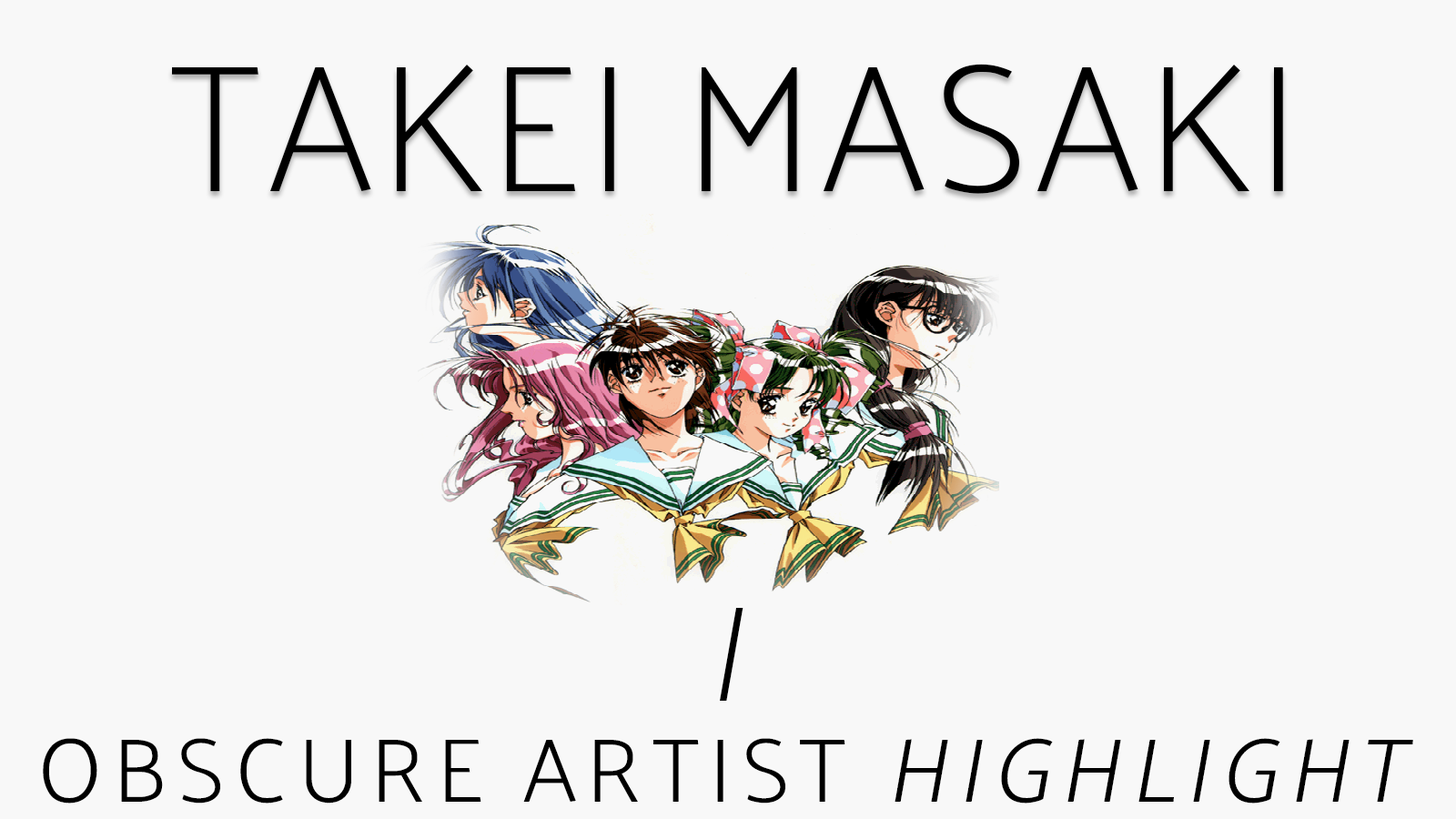
<style>
.page{position:relative;width:1456px;height:819px;background:#f8f8f8}
.page>*{position:absolute;margin:0}
.t1{font:182px "Palanquin-Thin";letter-spacing:0.025em;color:#000000}
.t2{font:136.5px "Palanquin-Thin";letter-spacing:0.1em;color:#000000;font-style:italic}
.t3{font:91px "Palanquin-Light";letter-spacing:0.1em;color:#000000;text-transform:uppercase}
.t4{font:91px "Palanquin-Light";letter-spacing:0.1em;color:#000000;text-transform:uppercase;font-style:italic}
</style>
<div class="page">
<p class="t1" style="left:172px;top:64px;width:1111px;height:130px">TAKEI MASAKI</p>
<p class="t2" style="left:720px;top:608px;width:23px;height:93px">I</p>
<p class="t3" style="left:43px;top:738px;width:1370px;height:66px">Obscure Artist <span class="t4">Highlight</span></p>
</div>
